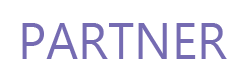
<style>
.page{position:relative;width:250px;height:83px;background:#ffffff}
.page>*{position:absolute;margin:0}
.t1{font:50px "Gadugi";color:#756bb2}
</style>
<div class="page">
<p class="t1" style="left:22px;top:23px;width:205px;height:36px">PARTNER</p>
</div>
